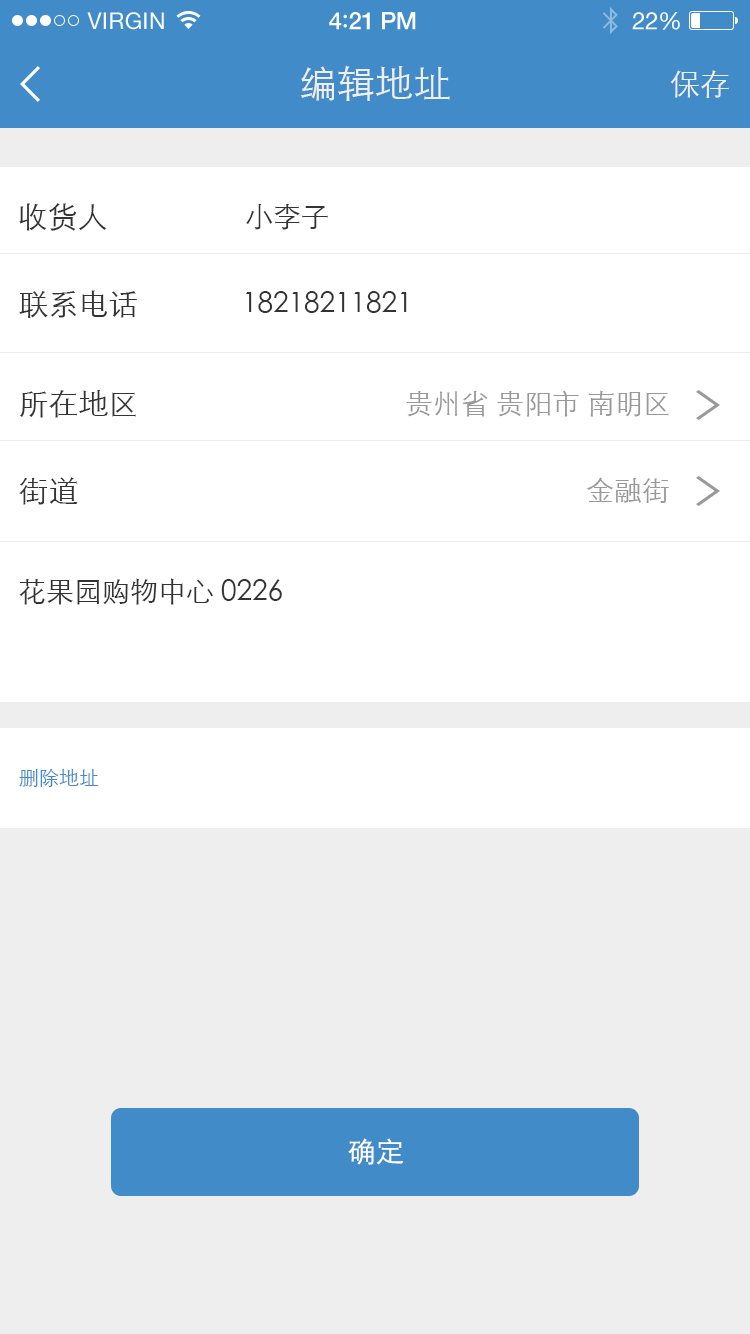
<style>
.page{position:relative;width:750px;height:1334px;background:#ffffff}
.page>*{position:absolute;margin:0}
.t1{font:23px "HelveticaNeue";letter-spacing:0.02em;color:#ffffff}
.t2{font:24px "HelveticaNeue-Medium";letter-spacing:-0.02em;color:#ffffff}
.t3{font:26px "Avenir-Medium";letter-spacing:-0.02em;color:#ffffff}
.t4{font:24px "HelveticaNeue";letter-spacing:-0.02em;color:#ffffff}
.t5{font:38px "STXihei";color:#eeeeee}
.t6{font:30px "STXihei";color:#eeeeee}
.t7{font:30px "STXihei";color:#333333}
.t8{font:28px "STXihei";color:#333333}
.t9{font:28px "STXihei";color:#999999}
.t10{font:20px "STXihei";color:#418bc8}
.t11{font:28px "STXihei";color:#ffffff}
</style>
<div class="page">
<p class="t1" style="left:87px;top:12px;width:77px;height:18px">VIRGIN</p>
<p class="t2" style="left:329px;top:12px;width:87px;height:18px">4<span class="t3">:</span>21 PM</p>
<p class="t4" style="left:632px;top:12px;width:48px;height:18px">22%</p>
<p class="t5" style="left:301px;top:65px;width:149px;height:36px">编辑地址</p>
<p class="t6" style="left:670px;top:70px;width:59px;height:28px">保存</p>
<p class="t7" style="left:19px;top:203px;width:88px;height:28px">收货人</p>
<p class="t8" style="left:246px;top:203px;width:82px;height:27px">小李子</p>
<p class="t7" style="left:19px;top:290px;width:118px;height:28px">联系电话</p>
<p class="t8" style="left:246px;top:291px;width:161px;height:22px">18218211821</p>
<p class="t7" style="left:19px;top:390px;width:117px;height:28px">所在地区</p>
<p class="t9" style="left:406px;top:390px;width:263px;height:27px">贵州省 贵阳市 南明区</p>
<p class="t7" style="left:19px;top:477px;width:59px;height:28px">街道</p>
<p class="t9" style="left:587px;top:477px;width:82px;height:26px">金融街</p>
<p class="t8" style="left:19px;top:578px;width:263px;height:27px">花果园购物中心0226</p>
<p class="t10" style="left:19px;top:768px;width:80px;height:19px">删除地址</p>
<p class="t11" style="left:348px;top:1138px;width:55px;height:27px">确定</p>
</div>
